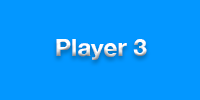
<style>
.page{position:relative;width:200px;height:100px;background:#0397ff}
.page>*{position:absolute;margin:0}
.t1{font:24px "HelveticaNeue-Bold";color:#ffffff}
</style>
<div class="page">
<p class="t1" style="left:56px;top:39px;width:91px;height:21px">Player 3</p>
</div>
